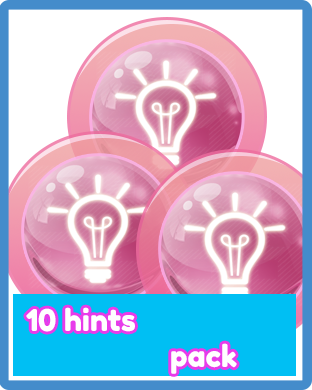
<style>
.page{position:relative;width:312px;height:390px;background:#ffffff}
.page>*{position:absolute;margin:0}
.t1{font:30px "FredokaOne-Regular";color:#ffffff}
</style>
<div class="page">
<p class="t1" style="left:26px;top:307px;width:211px;height:67px">10 hints <br>    pack</p>
</div>
